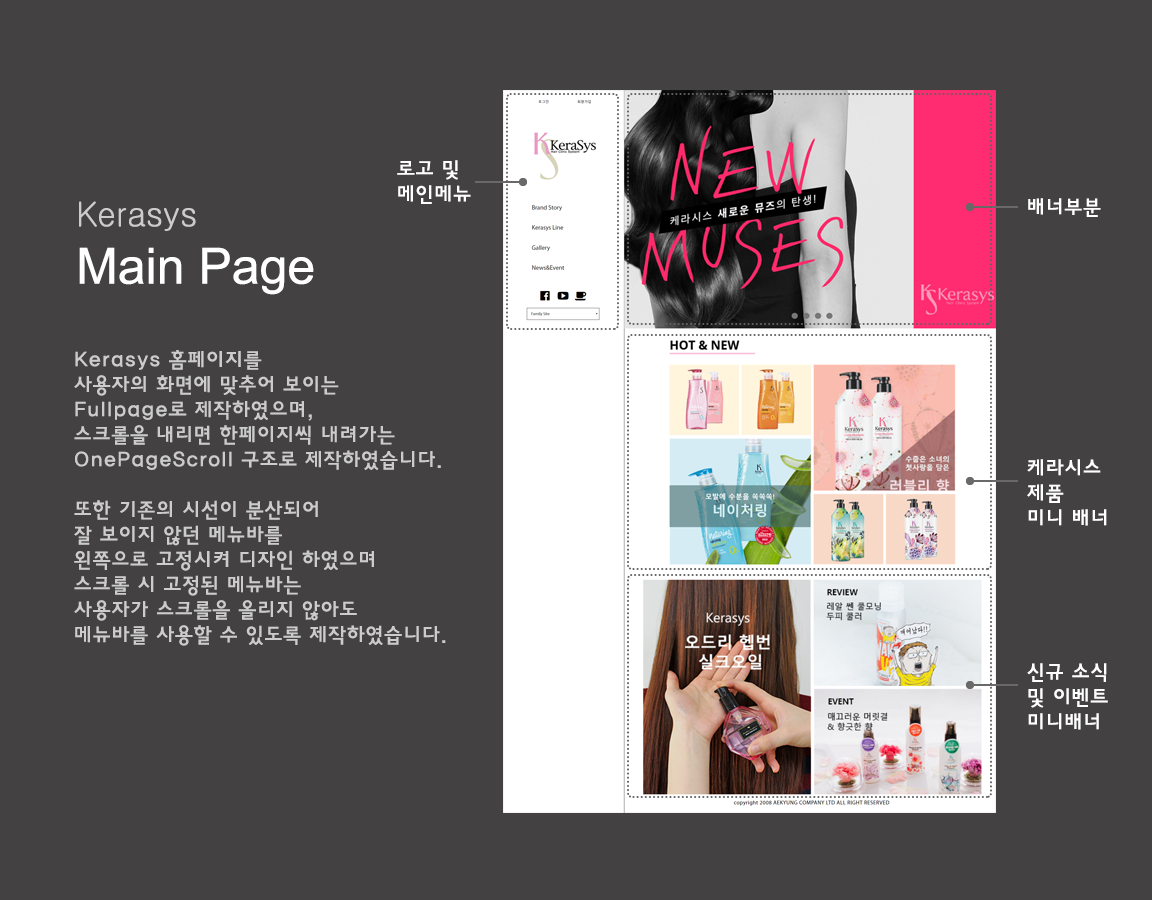
<style>
.page{position:relative;width:1152px;height:900px;background:#434141}
.page>*{position:absolute;margin:0}
.t1{font:20.8px "HaanYGodic23";color:#ffffff}
.t2{font:33.3px "Gulim";color:#cccccc}
.t3{font:50px "ArialMT";color:#ffffff}
.t4{font:20.8px "HaanYGodic23";color:#cccccc}
</style>
<div class="page">
<p class="t1" style="left:397px;top:160px;width:74px;height:44px;text-align:justify">로고 및<br>메인메뉴</p>
<p class="t1" style="left:1028px;top:198px;width:73px;height:19px">배너부분</p>
<p class="t2" style="left:79px;top:201px;width:117px;height:30px">Kerasys</p>
<p class="t3" style="left:79px;top:247px;width:235px;height:48px">Main Page</p>
<p class="t4" style="left:74px;top:350px;width:372px;height:296px;text-align:justify">Kerasys 홈페이지를<br>사용자의 화면에 맞추어 보이는<br>Fullpage로 제작하였으며,<br>스크롤을 내리면 한페이지씩 내려가는<br>OnePageScroll 구조로 제작하였습니다.<br><br>또한 기존의 시선이 분산되어<br>잘 보이지 않던 메뉴바를<br>왼쪽으로 고정시켜 디자인 하였으며<br>스크롤 시 고정된 메뉴바는<br>사용자가 스크롤을 올리지 않아도<br>메뉴바를 사용할 수 있도록 제작하였습니다.</p>
<p class="t1" style="left:1027px;top:459px;width:80px;height:67px;text-align:justify">케라시스<br>제품<br>미니 배너</p>
<p class="t1" style="left:1027px;top:663px;width:81px;height:67px;text-align:justify">신규 소식<br>및 이벤트<br>미니배너</p>
</div>
